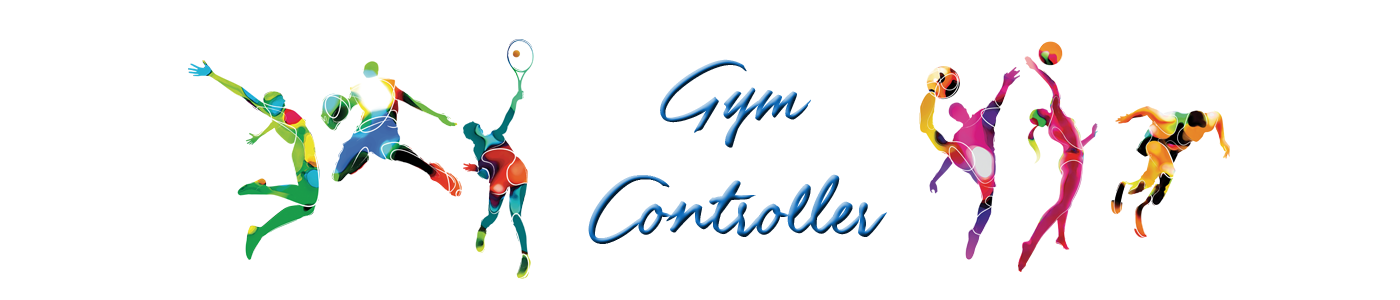
<style>
.page{position:relative;width:1400px;height:300px;background:#ffffff}
.page>*{position:absolute;margin:0}
.t1{font:96px "GuldScriptPERSONALUSEONLY"}
</style>
<div class="page">
<p class="t1" style="left:588px;top:59px;width:299px;height:185px;text-align:center">Gym<br>Controller</p>
</div>
